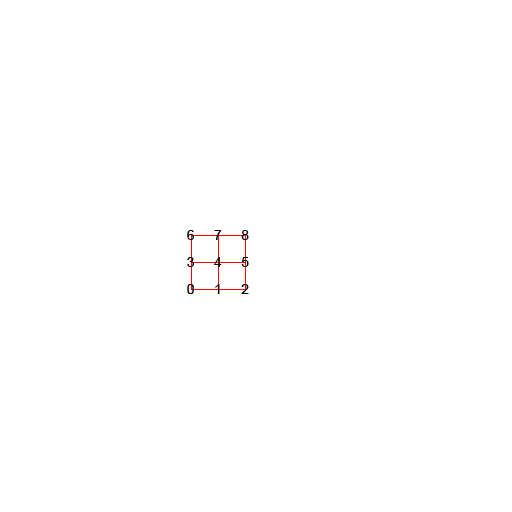
<style>
.page{position:relative;width:512px;height:512px;background:#ffffff}
.page>*{position:absolute;margin:0}
.t1{font:14px/27px "ArialMT";color:#000000}
</style>
<div class="page">
<p class="t1" style="left:187px;top:230px;width:62px;height:64px">6     7     8<br>  3     4     5<br>  0     1     2</p>
</div>
